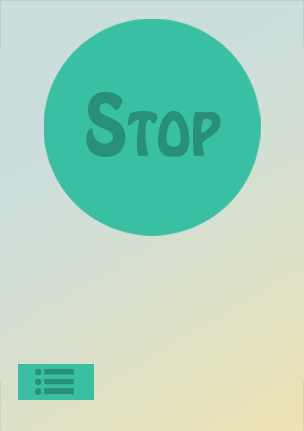
<style>
.page{position:relative;width:304px;height:431px;background:#39c0a2}
.page>*{position:absolute;margin:0}
.t1{font:74px "HoboStd";color:#288f78;font-variant:small-caps;font-weight:bold;scale:0.87 1}
</style>
<div class="page">
<p class="t1" style="left:86px;top:92px;width:135px;height:65px">Stop</p>
</div>
